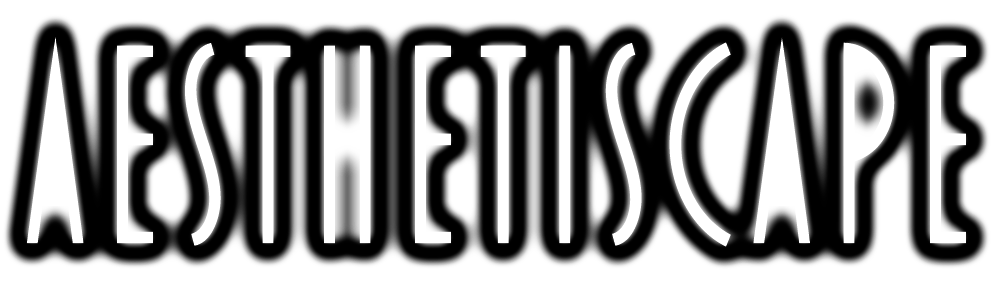
<style>
.page{position:relative;width:1000px;height:300px;background:#ffffff}
.page>*{position:absolute;margin:0}
.t1{font:288.7px "Blakely-Light";color:#ffffff;scale:0.86 1}
</style>
<div class="page">
<p class="t1" style="left:26px;top:36px;width:940px;height:211px">aesthetiscape</p>
</div>
